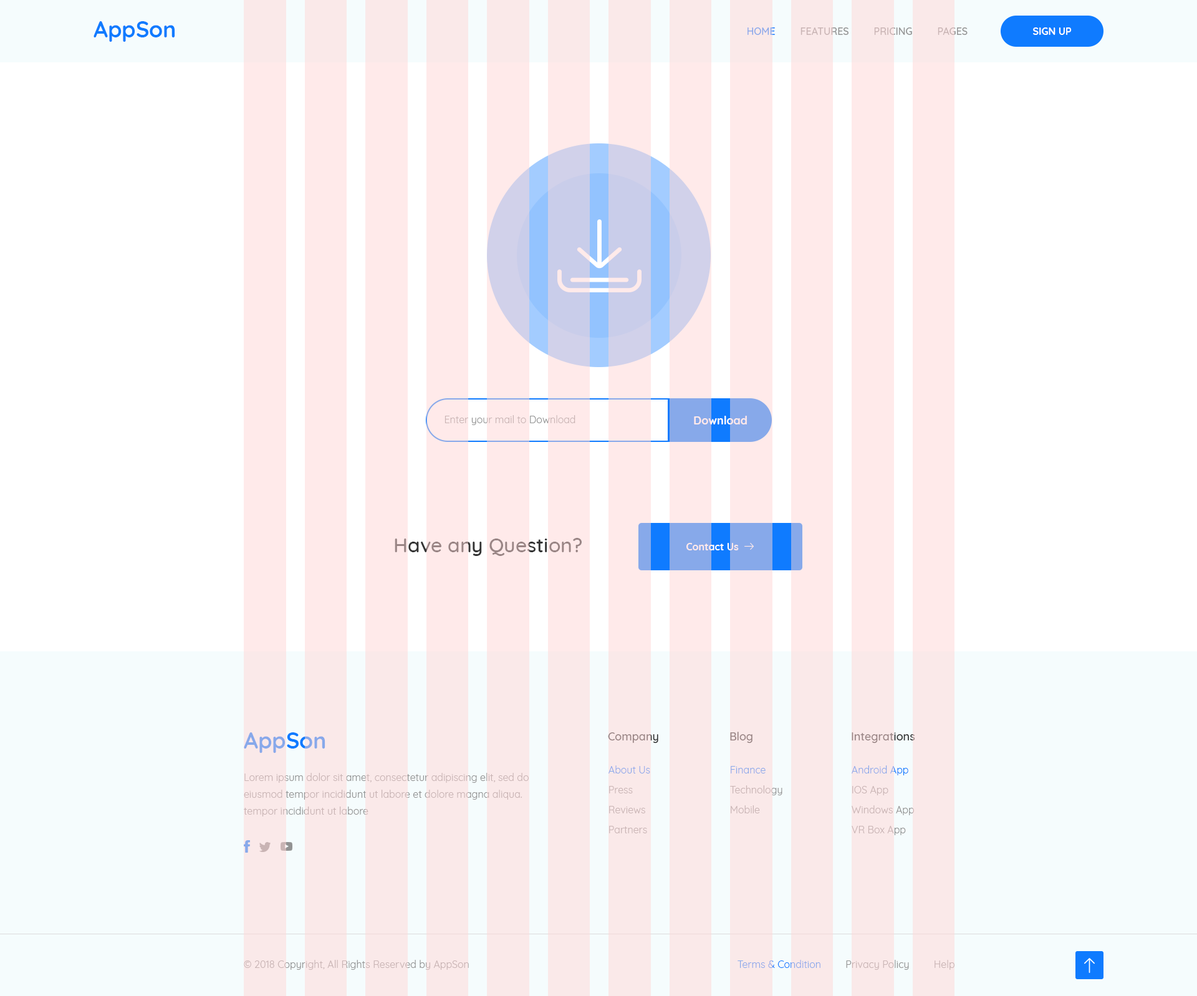
<style>
.page{position:relative;width:1197px;height:996px;background:#ffffff}
.page>*{position:absolute;margin:0}
.t1{font:22.4px "Quicksand-Bold";color:#0f7bff}
.t2{font:10px "Quicksand-Medium";text-transform:uppercase}
.t3{font:10px "Quicksand-Bold";color:#ffffff}
.t4{font:10px "Quicksand-Regular";color:#c9b4b4}
.t5{font:11.2px "Quicksand-Bold";color:#ffffff}
.t6{font:19.9px "Quicksand-Medium"}
.t7{font:22.4px "Quicksand-Bold";color:#87a9ea}
.t8{font:11.2px "Quicksand-Medium";color:#998585}
.t9{font:10px/16.8px "Quicksand-Regular"}
.t10{font:10px "Quicksand-Regular";color:#87a9ea}
.t11{font:10px "Quicksand-Regular"}
</style>
<div class="page">
<p class="t1" style="left:94px;top:21px;width:81px;height:21px">AppSon</p>
<p class="t2" style="left:747px;top:27px;width:221px;height:8px">Home         Features         Pricing         Pages</p>
<p class="t3" style="left:1033px;top:27px;width:39px;height:8px">SIGN UP</p>
<p class="t4" style="left:444px;top:415px;width:131px;height:10px">Enter your mail to Download</p>
<p class="t5" style="left:694px;top:416px;width:53px;height:9px">Download</p>
<p class="t6" style="left:395px;top:538px;width:187px;height:18px">Have any Question?</p>
<p class="t3" style="left:686px;top:543px;width:53px;height:7px">Contact Us</p>
<p class="t7" style="left:244px;top:733px;width:81px;height:20px">AppSon</p>
<p class="t8" style="left:608px;top:733px;width:50px;height:10px">Company</p>
<p class="t8" style="left:730px;top:732px;width:22px;height:11px">Blog</p>
<p class="t8" style="left:852px;top:733px;width:63px;height:10px">Integrations</p>
<p class="t9" style="left:244px;top:773px;width:285px;height:44px">Lorem ipsum dolor sit amet, consectetur adipiscing elit, sed do eiusmod tempor incididunt ut labore et dolore magna aliqua. tempor incididunt ut labore</p>
<p class="t10" style="left:608px;top:766px;width:42px;height:8px">About Us</p>
<p class="t10" style="left:731px;top:766px;width:35px;height:8px">Finance</p>
<p class="t11" style="left:852px;top:766px;width:56px;height:10px">Android App</p>
<p class="t4" style="left:730px;top:786px;width:52px;height:9px">Technology</p>
<p class="t4" style="left:609px;top:786px;width:24px;height:8px">Press</p>
<p class="t4" style="left:852px;top:786px;width:36px;height:9px">IOS App</p>
<p class="t4" style="left:609px;top:806px;width:36px;height:8px">Reviews</p>
<p class="t4" style="left:731px;top:805px;width:29px;height:9px">Mobile</p>
<p class="t11" style="left:852px;top:805px;width:62px;height:10px">Windows App</p>
<p class="t4" style="left:609px;top:826px;width:38px;height:8px">Partners</p>
<p class="t4" style="left:852px;top:826px;width:54px;height:9px">VR Box App</p>
<p class="t4" style="left:244px;top:960px;width:225px;height:10px">© 2018 Copyright, All Rights Reserved by AppSon</p>
<p class="t11" style="left:738px;top:960px;width:216px;height:10px">Terms &amp; Condition         Privacy Policy         Help</p>
</div>
